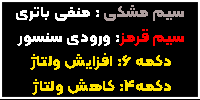
<style>
.page{position:relative;width:200px;height:100px;background:#000000}
.page>*{position:absolute;margin:0}
.t1{font:15.2px/25px "Kalameh-ExtraBold";letter-spacing:0.01em;color:#ffffff;scale:1.12 1}
.t2{font:15.2px/25px "Kalameh-ExtraBold";letter-spacing:0.01em;color:#ae9e9e;scale:1.12 1}
.t3{font:15.2px/25px "Kalameh-ExtraBold";letter-spacing:0.01em;color:#fe0000;scale:1.12 1}
.t4{font:15.2px/25px "Kalameh-ExtraBold";letter-spacing:0.01em;color:#ffe400;scale:1.12 1}
</style>
<div class="page">
<p class="t1" style="left:16px;top:5px;width:168px;height:41px"><span class="t2">سیم مشکی</span> : منفی باتری<br><span class="t3">سیم قرمز</span>: ورودی سنسور</p>
<p class="t4" style="left:30px;top:53px;width:141px;height:42px">دکمه 6: افزایش ولتاژ<br>دکمه4: کاهش ولتاژ</p>
</div>
